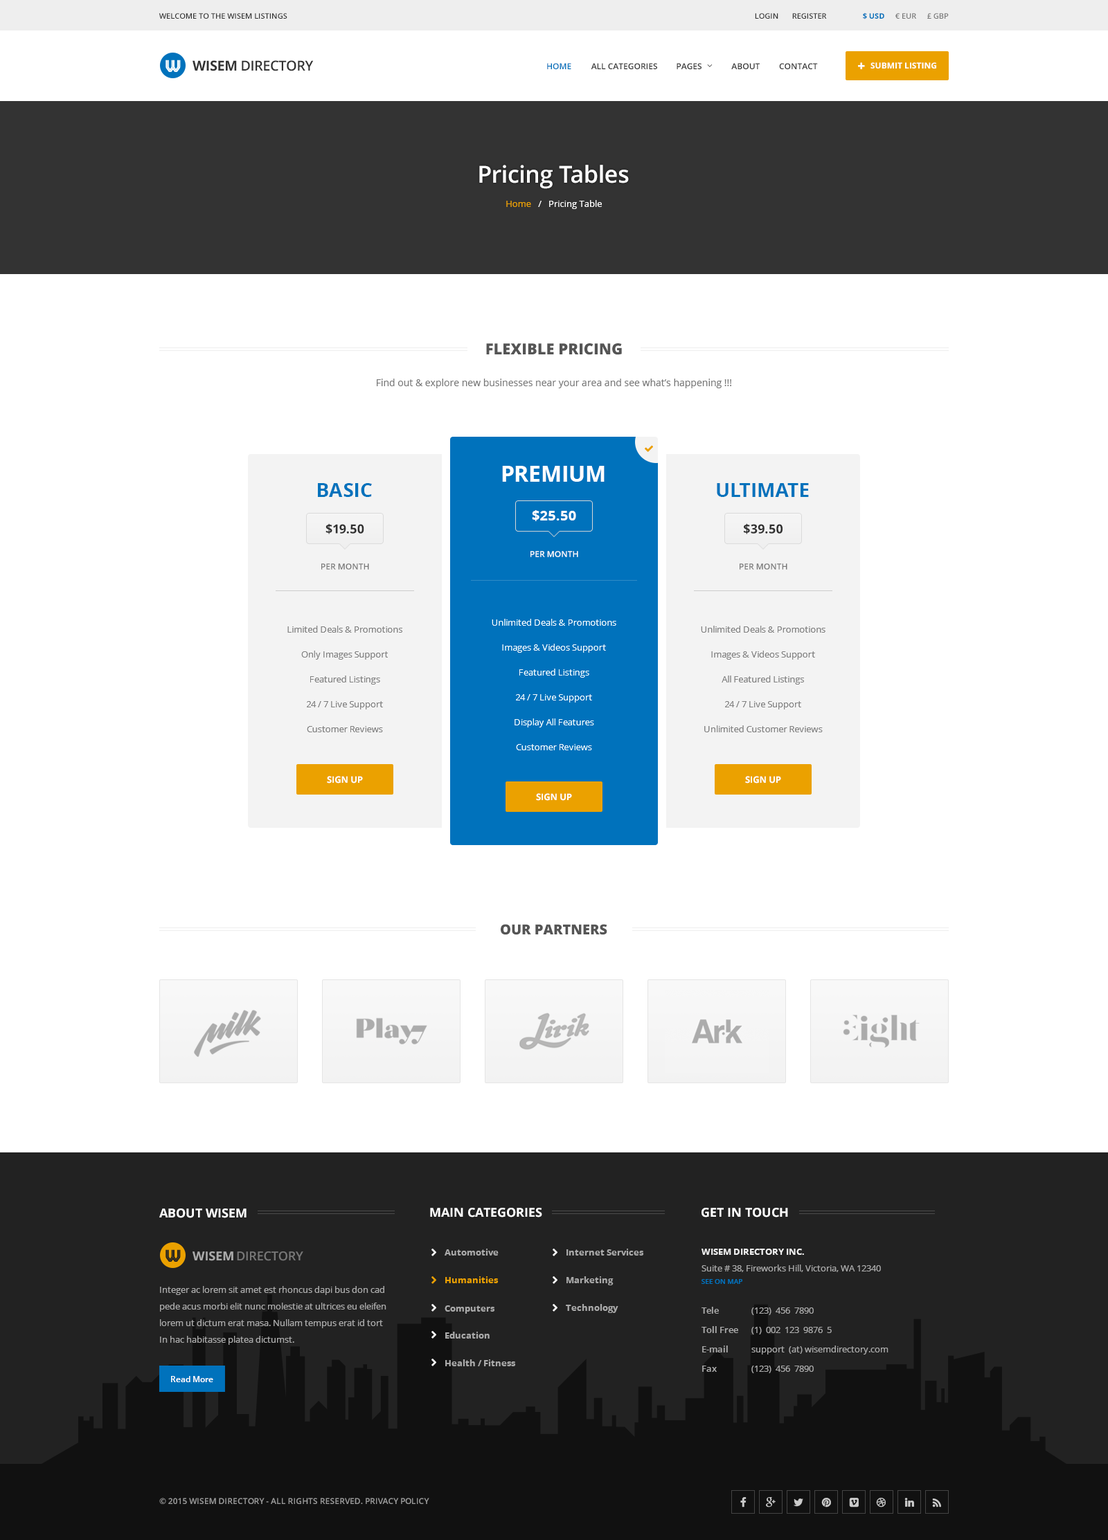
<style>
.page{position:relative;width:1108px;height:1540px;background:#ffffff}
.page>*{position:absolute;margin:0}
.t1{font:7.6px "OpenSans-Semibold";color:#333333;text-transform:uppercase}
.t2{font:7.6px "OpenSans-Bold";color:#0072bc;text-transform:uppercase}
.t3{font:7.6px "OpenSans-Semibold";color:#777777;text-transform:uppercase}
.t4{font:13.8px "OpenSans-Semibold";letter-spacing:-0.025em;color:#333333;text-transform:uppercase}
.t5{font:13.8px "OpenSans-Bold";letter-spacing:-0.025em;color:#333333;text-transform:uppercase}
.t6{font:8.3px "OpenSans-Semibold";color:#0072bc;text-transform:uppercase}
.t7{font:8.3px "OpenSans-Semibold";color:#333333;text-transform:uppercase}
.t8{font:8.3px "OpenSans-Bold";color:#ffffff;text-transform:uppercase}
.t9{font:23.5px "OpenSans-Semibold";color:#ffffff}
.t10{font:9px "OpenSans";color:#ffffff}
.t11{font:9px "OpenSans";color:#eba100}
.t12{font:15.2px "OpenSans-Extrabold";color:#555555;text-transform:uppercase}
.t13{font:9.7px "OpenSans";color:#777777}
.t14{font:22.2px "OpenSans-Bold";color:#ffffff;text-transform:uppercase}
.t15{font:19.4px "OpenSans-Bold";color:#0072bc;text-transform:uppercase}
.t16{font:13.8px "OpenSans-Bold";color:#ffffff}
.t17{font:12.5px "OpenSans-Bold";color:#303030}
.t18{font:8.3px "OpenSans-Semibold";color:#ffffff;text-transform:uppercase}
.t19{font:8.3px "OpenSans-Semibold";color:#777777;text-transform:uppercase}
.t20{font:9px/24.9px "OpenSans";color:#808080}
.t21{font:9px/24.9px "OpenSans";color:#ffffff}
.t22{font:9px "OpenSans-Bold";letter-spacing:-0.01em;color:#ffffff;text-transform:uppercase}
.t23{font:13.8px "OpenSans-Extrabold";color:#555555;text-transform:uppercase}
.t24{font:12.5px "OpenSans-Bold";color:#ffffff;text-transform:uppercase}
.t25{font:12.5px "OpenSans-Bold";color:#ffffff}
.t26{font:12.5px "OpenSans-Bold";color:#aaaaaa;text-transform:uppercase}
.t27{font:12.5px "OpenSans-Semibold";letter-spacing:-0.01em;color:#777777;text-transform:uppercase}
.t28{font:9px "OpenSans-Bold";color:#aaaaaa}
.t29{font:9px/16.6px "OpenSans";color:#aaaaaa}
.t30{font:9px/16.6px "OpenSans-Bold";color:#eeeeee}
.t31{font:9px "OpenSans-Bold";color:#eba100}
.t32{font:6.9px "OpenSans-Semibold";color:#0072bc;text-transform:uppercase}
.t33{font:9px/19.4px "OpenSans-Semibold";color:#aaaaaa}
.t34{font:9px/19.4px "OpenSans";color:#aaaaaa}
.t35{font:8.3px "OpenSans-Semibold";color:#ffffff}
.t36{font:8.3px "OpenSans-Semibold";letter-spacing:-0.01em;color:#999999;text-transform:uppercase}
</style>
<div class="page">
<p class="t1" style="left:159px;top:13px;width:128px;height:6px">Welcome to the Wisem listings</p>
<p class="t1" style="left:755px;top:13px;width:23px;height:6px">LOGIN</p>
<p class="t1" style="left:792px;top:13px;width:35px;height:6px">register</p>
<p class="t2" style="left:863px;top:12px;width:21px;height:7px">$ USD</p>
<p class="t3" style="left:895px;top:13px;width:21px;height:6px">€ EUR</p>
<p class="t3" style="left:927px;top:13px;width:21px;height:6px">£ GBP</p>
<p class="t4" style="left:192px;top:60px;width:122px;height:11px"><span class="t5">wisem</span> directory</p>
<p class="t6" style="left:547px;top:63px;width:24px;height:6px">HOME</p>
<p class="t7" style="left:591px;top:63px;width:66px;height:6px">All categories</p>
<p class="t7" style="left:676px;top:63px;width:25px;height:6px">Pages</p>
<p class="t7" style="left:731px;top:63px;width:28px;height:6px">About</p>
<p class="t7" style="left:779px;top:63px;width:39px;height:6px">Contact</p>
<p class="t8" style="left:870px;top:62px;width:66px;height:7px">Submit Listing</p>
<p class="t9" style="left:479px;top:165px;width:150px;height:24px">Pricing Tables</p>
<p class="t10" style="left:506px;top:200px;width:96px;height:9px"><span class="t11">Home</span>   /   Pricing Table</p>
<p class="t12" style="left:486px;top:343px;width:136px;height:12px">flexible pricing</p>
<p class="t13" style="left:377px;top:379px;width:354px;height:9px">Find out &amp; explore new businesses near your area and see what’s happening !!!</p>
<p class="t14" style="left:502px;top:466px;width:102px;height:16px">Premium</p>
<p class="t15" style="left:318px;top:483px;width:54px;height:14px">Basic</p>
<p class="t15" style="left:717px;top:483px;width:92px;height:14px">Ultimate</p>
<p class="t16" style="left:532px;top:510px;width:44px;height:11px">$25.50</p>
<p class="t17" style="left:325px;top:523px;width:39px;height:11px">$19.50</p>
<p class="t17" style="left:744px;top:523px;width:38px;height:11px">$39.50</p>
<p class="t18" style="left:530px;top:551px;width:48px;height:6px">per month</p>
<p class="t19" style="left:321px;top:564px;width:48px;height:6px">per month</p>
<p class="t19" style="left:739px;top:564px;width:48px;height:6px">per month</p>
<p class="t20" style="left:287px;top:626px;width:115px;height:106px;text-align:center">Limited Deals &amp; Promotions<br>Only Images Support<br>Featured Listings<br>24 / 7 Live Support<br>Customer Reviews</p>
<p class="t21" style="left:492px;top:619px;width:124px;height:131px;text-align:center">Unlimited Deals &amp; Promotions<br>Images &amp; Videos Support<br>Featured Listings<br>24 / 7 Live Support<br>Display All Features<br>Customer Reviews</p>
<p class="t20" style="left:701px;top:626px;width:124px;height:106px;text-align:center">Unlimited Deals &amp; Promotions<br>Images &amp; Videos Support<br>All Featured Listings<br>24 / 7 Live Support<br>Unlimited Customer Reviews</p>
<p class="t22" style="left:327px;top:776px;width:36px;height:8px">sign up</p>
<p class="t22" style="left:745px;top:776px;width:36px;height:8px">sign up</p>
<p class="t22" style="left:536px;top:793px;width:36px;height:8px">sign up</p>
<p class="t23" style="left:501px;top:924px;width:106px;height:11px">our partners</p>
<p class="t24" style="left:159px;top:1209px;width:87px;height:9px">About wisem</p>
<p class="t24" style="left:430px;top:1208px;width:112px;height:10px">main categories</p>
<p class="t25" style="left:701px;top:1208px;width:87px;height:10px">GET IN TOUCH</p>
<p class="t26" style="left:192px;top:1252px;width:41px;height:9px">wisem</p>
<p class="t27" style="left:237px;top:1252px;width:66px;height:9px">directory</p>
<p class="t28" style="left:444px;top:1249px;width:54px;height:7px">Automotive</p>
<p class="t28" style="left:566px;top:1249px;width:78px;height:7px">Internet Services</p>
<p class="t29" style="left:701px;top:1249px;width:180px;height:23px"><span class="t30">WISEM DIRECTORY INC.<br></span>Suite # 38, Fireworks Hill, Victoria, WA 12340</p>
<p class="t31" style="left:445px;top:1277px;width:53px;height:7px">Humanities</p>
<p class="t28" style="left:566px;top:1277px;width:47px;height:9px">Marketing</p>
<p class="t29" style="left:160px;top:1286px;width:226px;height:59px">Integer ac lorem sit amet est rhoncus dapi bus don cad<br>pede acus morbi elit nunc molestie at ultrices eu eleifen<br>lorem ut dictum erat masa. Nullam tempus erat id tort<br>In hac habitasse platea dictumst.</p>
<p class="t32" style="left:701px;top:1279px;width:41px;height:5px">see on map</p>
<p class="t28" style="left:444px;top:1306px;width:51px;height:8px">Computers</p>
<p class="t28" style="left:566px;top:1304px;width:52px;height:9px">Technology</p>
<p class="t33" style="left:701px;top:1307px;width:37px;height:65px">Tele<br>Toll Free<br>E-mail<br>Fax</p>
<p class="t34" style="left:751px;top:1308px;width:137px;height:66px">(123)  456  7890<br>(1)  002  123  9876  5<br>support  (at) wisemdirectory.com<br>(123)  456  7890</p>
<p class="t28" style="left:445px;top:1332px;width:44px;height:7px">Education</p>
<p class="t28" style="left:445px;top:1360px;width:71px;height:7px">Health / Fitness</p>
<p class="t35" style="left:171px;top:1376px;width:42px;height:7px">Read More</p>
<p class="t36" style="left:159px;top:1498px;width:204px;height:6px">© 2015 Wisem Directory - All Rights Reserved.</p>
<p class="t36" style="left:366px;top:1498px;width:63px;height:6px">Privacy Policy</p>
</div>
